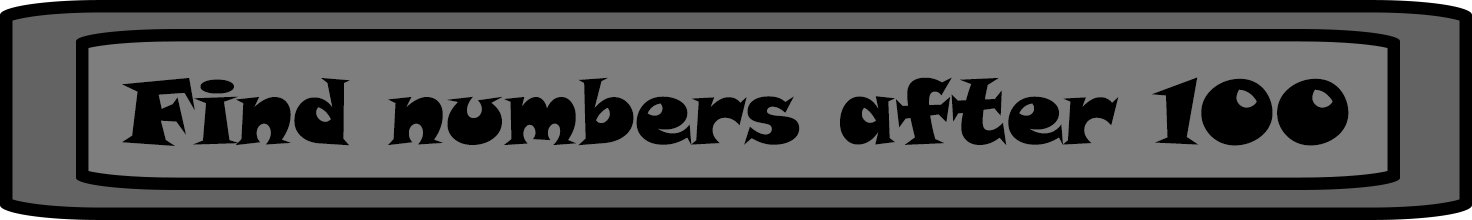
<style>
.page{position:relative;width:1472px;height:220px;background:#7e7e7e}
.page>*{position:absolute;margin:0}
.t1{font:90px "SnapITC-Regular";color:#000000}
</style>
<div class="page">
<p class="t1" style="left:122px;top:77px;width:1227px;height:69px">Find numbers after 100</p>
</div>
